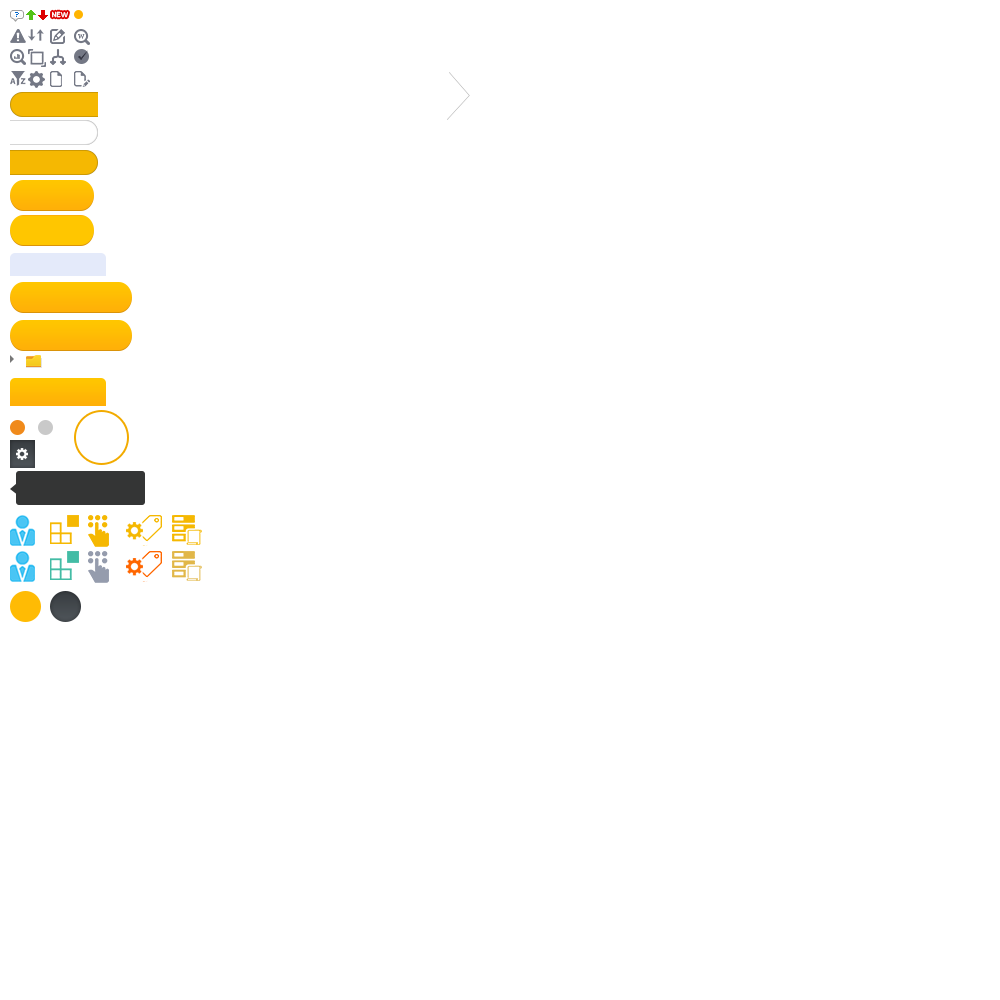
<style>
.page{position:relative;width:1000px;height:1000px;background:#ffffff}
.page>*{position:absolute;margin:0}
.t1{font:8px "KautivaCaps";text-transform:uppercase}
.t2{font:6.1px "CharlemagneStd-Bold";color:#747885;scale:0.94 1}
</style>
<div class="page">
<p class="t1" style="left:52px;top:11px;width:16px;height:7px">new</p>
<p class="t2" style="left:78px;top:34px;width:7px;height:5px">w</p>
</div>
